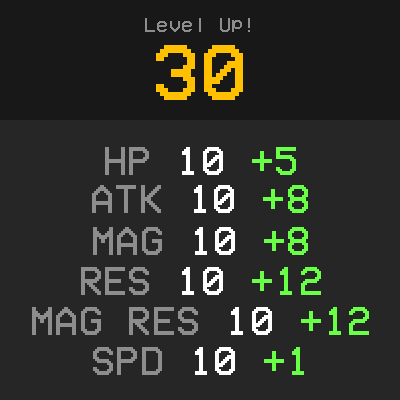
<style>
.page{position:relative;width:400px;height:400px;background:#262626}
.page>*{position:absolute;margin:0}
.t1{font:21px "VCROSDMono";letter-spacing:0.01em;color:#8d8d8d}
.t2{font:80.2px "VCROSDMono";letter-spacing:0.01em;color:#ffc000}
.t3{font:41px "VCROSDMono";letter-spacing:0.01em;color:#8d8d8d}
.t4{font:41px "VCROSDMono";letter-spacing:0.01em;color:#ffffff}
.t5{font:41px "VCROSDMono";letter-spacing:0.01em;color:#6aff47}
</style>
<div class="page">
<p class="t1" style="left:145px;top:18px;width:105px;height:14px">Level Up!</p>
<p class="t2" style="left:156px;top:45px;width:87px;height:55px">30</p>
<p class="t3" style="left:105px;top:147px;width:191px;height:28px">HP <span class="t4">10 </span><span class="t5">+5</span></p>
<p class="t3" style="left:92px;top:185px;width:216px;height:28px">ATK <span class="t4">10 </span><span class="t5">+8</span></p>
<p class="t3" style="left:93px;top:227px;width:215px;height:28px">MAG <span class="t4">10 </span><span class="t5">+8</span></p>
<p class="t3" style="left:81px;top:267px;width:240px;height:28px">RES <span class="t4">10 </span><span class="t5">+12</span></p>
<p class="t3" style="left:32px;top:307px;width:337px;height:28px">MAG RES <span class="t4">10 </span><span class="t5">+12</span></p>
<p class="t3" style="left:93px;top:347px;width:211px;height:28px">SPD <span class="t4">10 </span><span class="t5">+1</span></p>
</div>
